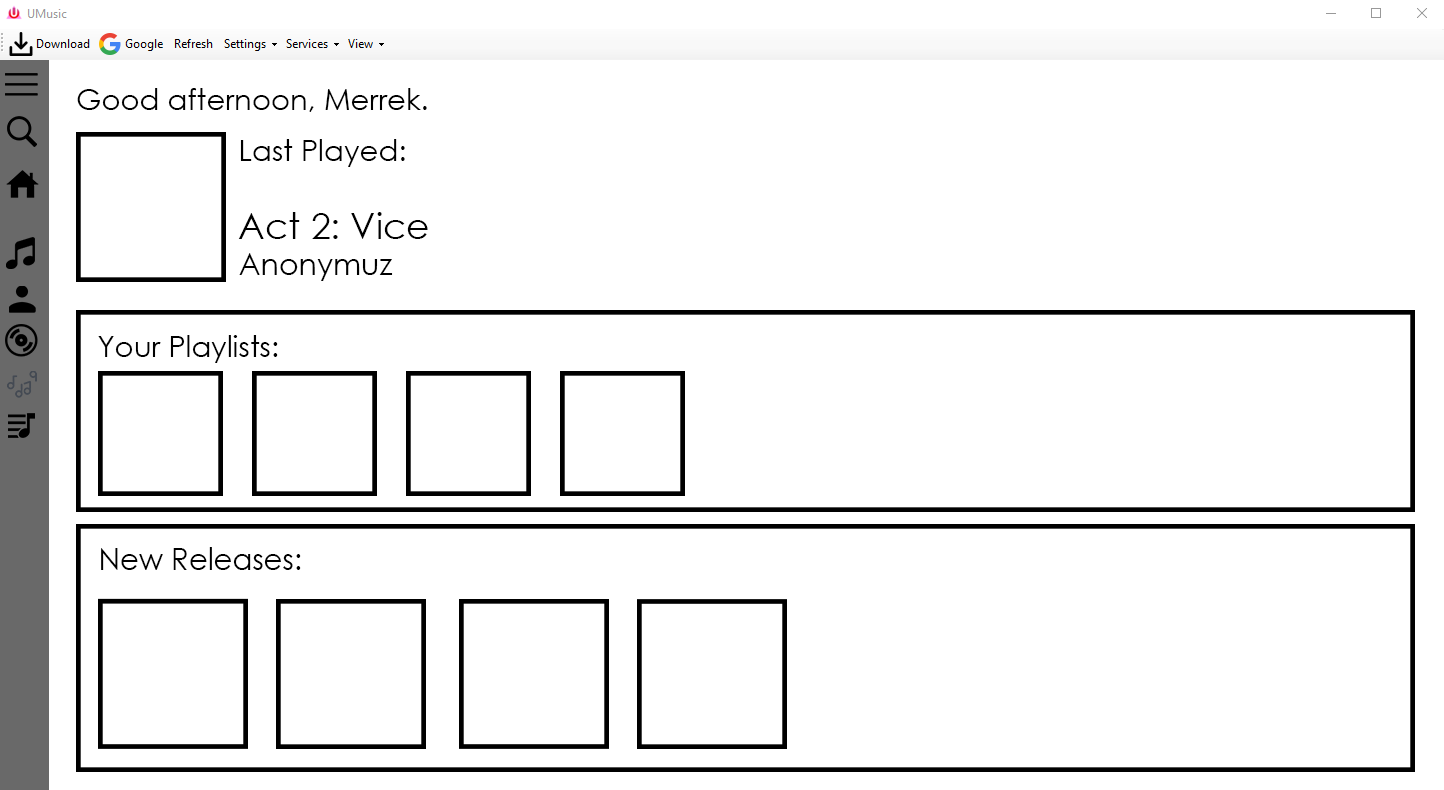
<style>
.page{position:relative;width:1444px;height:790px;background:#ffffff}
.page>*{position:absolute;margin:0}
.t1{font:29.1px "CenturyGothic";color:#000000}
.t2{font:36px "CenturyGothic";color:#000000}
.t3{font:30px "CenturyGothic";color:#000000}
.t4{font:31.1px "CenturyGothic";color:#000000;scale:0.94 1}
</style>
<div class="page">
<p class="t1" style="left:77px;top:88px;width:350px;height:24px">Good afternoon, Merrek.</p>
<p class="t1" style="left:238px;top:139px;width:190px;height:142px">Last Played:<br><br><span class="t2">Act 2: Vice<br></span><span class="t3">Anonymuz</span></p>
<p class="t1" style="left:98px;top:335px;width:180px;height:28px">Your Playlists:</p>
<p class="t4" style="left:101px;top:547px;width:200px;height:23px">New Releases:</p>
</div>
